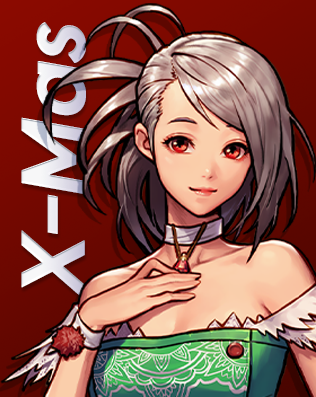
<style>
.page{position:relative;width:316px;height:397px}
.page>*{position:absolute;margin:0}
.t1{font:82px "NEXONLv1GothicBold";font-weight:bold;font-style:italic}
</style>
<div class="page">
<p class="t1" style="left:21px;top:22px;width:65px;height:276px;rotate:-90deg">X-Mas</p>
</div>
